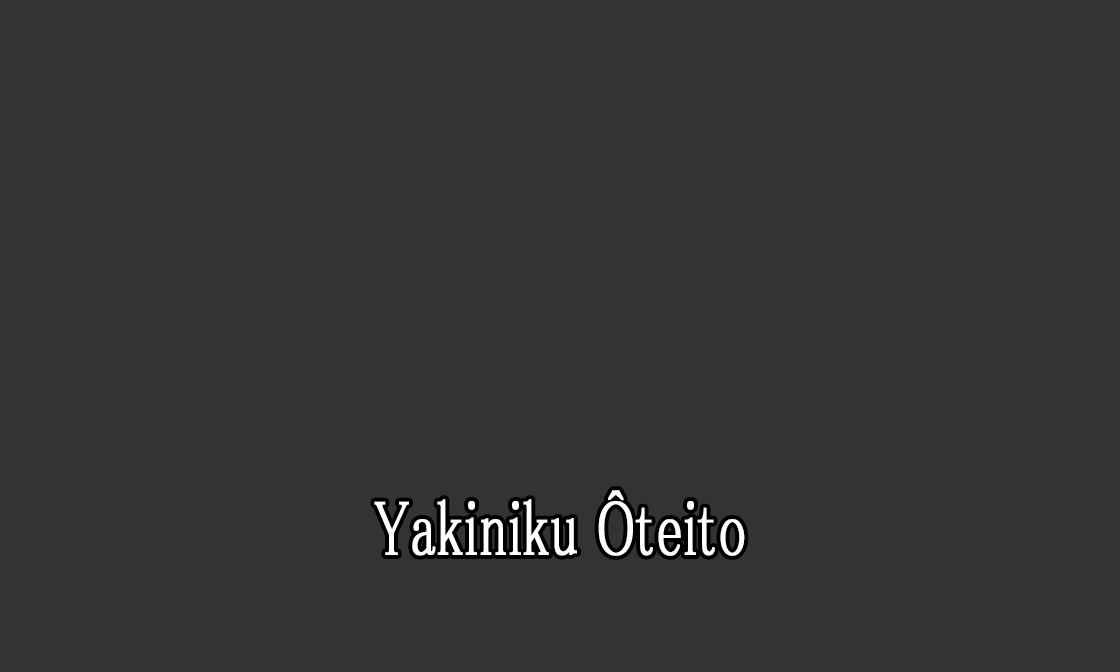
<style>
.page{position:relative;width:1120px;height:672px;background:#333333}
.page>*{position:absolute;margin:0}
.t1{font:78.4px "MS-PMincho";color:#ffffff;font-weight:bold;scale:0.69 1}
</style>
<div class="page">
<p class="t1" style="left:374px;top:490px;width:371px;height:66px">Yakiniku Ôteito</p>
</div>
